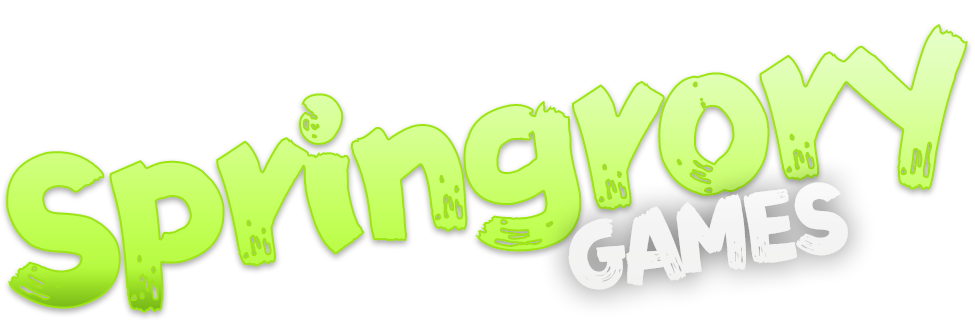
<style>
.page{position:relative;width:975px;height:323px;background:#ffffff}
.page>*{position:absolute;margin:0}
.t1{font:194px "FZFENSTXJW--GB1-0";letter-spacing:-0.08em}
.t2{font:90px "FZFENSTXJW--GB1-0";letter-spacing:-0.08em;color:#ffffff}
</style>
<div class="page">
<p class="t1" style="left:6px;top:24px;width:962px;height:289px;rotate:-9deg">Springrory</p>
<p class="t2" style="left:568px;top:182px;width:280px;height:108px;rotate:-9deg">GAMES</p>
</div>
